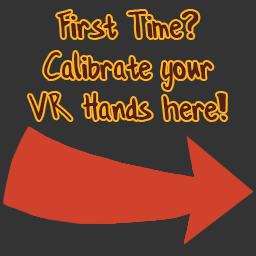
<style>
.page{position:relative;width:256px;height:256px;background:#333333}
.page>*{position:absolute;margin:0}
.t1{font:34.3px "ConformityNormal";color:#52221a}
</style>
<div class="page">
<p class="t1" style="left:29px;top:11px;width:198px;height:109px;text-align:center">First Time?<br>Calibrate your<br>VR Hands here!</p>
</div>
